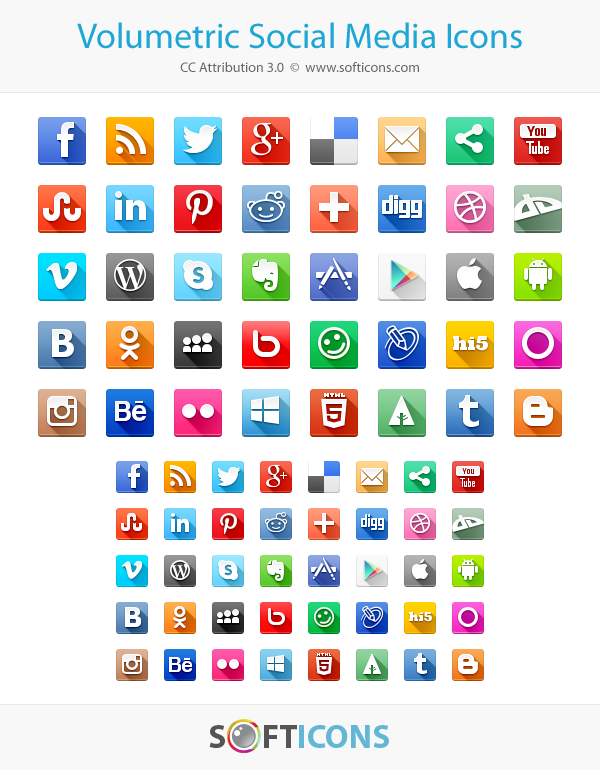
<style>
.page{position:relative;width:600px;height:770px;background:#ffffff}
.page>*{position:absolute;margin:0}
.t1{font:14px "MyriadPro-Regular";color:#666666}
.t2{font:36px "MyriadPro-Regular";color:#1ea6d4}
.t3{font:36px/24px "MyriadPro-Regular";color:#1ea6d4}
.t4{font:14px/24px "MyriadPro-Regular";color:#666666}
.t5{font:33.1px "MyriadPro-Bold";color:#555555;text-transform:uppercase}
.t6{font:33.1px "MyriadPro-Bold";color:#62b7d4;text-transform:uppercase}
</style>
<div class="page">
<p class="t1" style="left:77px;top:22px;width:445px;height:50px;text-align:center"><span class="t2">Volumetric Soci</span><span class="t3">al Media Icons<br></span><span class="t4">CC Attributi</span>on 3.0  ©  www.softicons.com</p>
<p class="t5" style="left:209px;top:725px;width:180px;height:23px">s      ft<span class="t6">icons</span></p>
</div>
